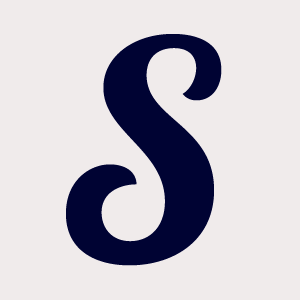
<style>
.page{position:relative;width:300px;height:300px;background:#f0ebeb}
.page>*{position:absolute;margin:0}
.t1{font:300px "Lobster1.4";color:#000333}
</style>
<div class="page">
<p class="t1" style="left:66px;top:34px;width:156px;height:232px">S</p>
</div>
